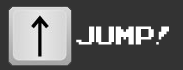
<style>
.page{position:relative;width:183px;height:70px;background:#333333}
.page>*{position:absolute;margin:0}
.t1{font:36px "ArcadeClassic";color:#ffffff}
</style>
<div class="page">
<p class="t1" style="left:76px;top:26px;width:93px;height:19px">Jump!</p>
</div>
